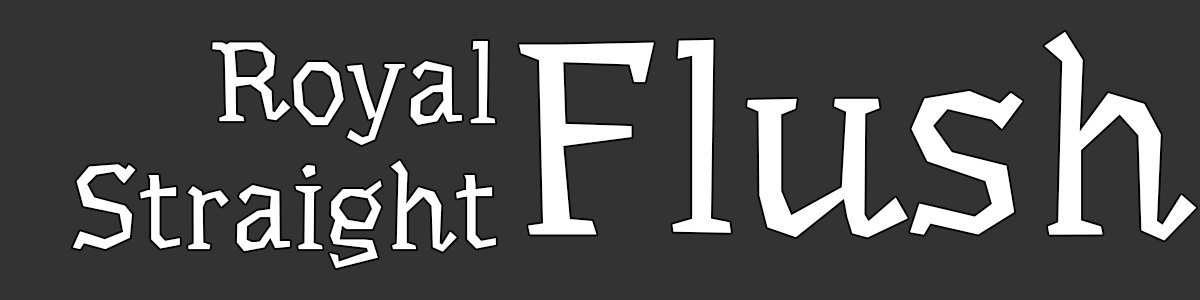
<style>
.page{position:relative;width:1200px;height:300px;background:#333333}
.page>*{position:absolute;margin:0}
.t1{font:114.3px "Underdog-Regular";color:#ffffff}
.t2{font:271.8px "Underdog-Regular";color:#ffffff}
.t3{font:117.8px "Underdog-Regular";color:#ffffff}
</style>
<div class="page">
<p class="t1" style="left:212px;top:41px;width:284px;height:104px">Royal</p>
<p class="t2" style="left:519px;top:31px;width:678px;height:210px">Flush</p>
<p class="t3" style="left:72px;top:160px;width:424px;height:109px">Straight</p>
</div>
